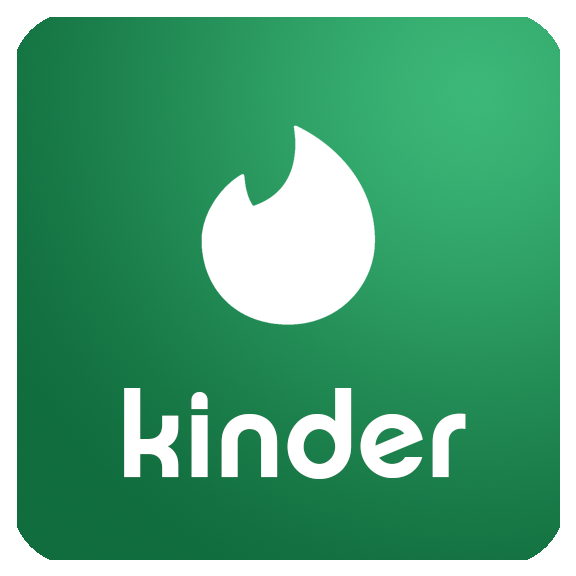
<style>
.page{position:relative;width:576px;height:576px;background:#ffffff}
.page>*{position:absolute;margin:0}
.t1{font:120px "Chalet-NewYorkNineteenSeventy";color:#ffffff}
</style>
<div class="page">
<p class="t1" style="left:124px;top:388px;width:342px;height:91px">kinder</p>
</div>
